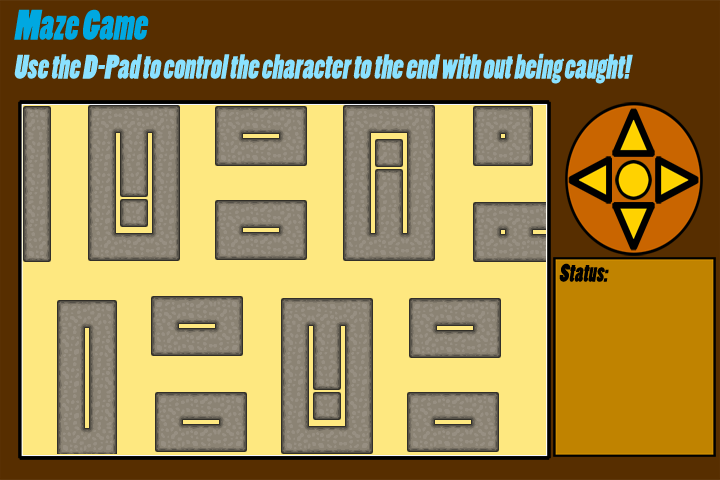
<style>
.page{position:relative;width:720px;height:480px;background:#fee880}
.page>*{position:absolute;margin:0}
.t1{font:40px "PoplarStd";color:#00a8e1;font-style:italic;scale:0.9 1}
.t2{font:32px "PoplarStd";color:#8ae1ff;font-style:italic;scale:0.9 1}
.t3{font:24px "PoplarStd";color:#000000;font-style:italic;scale:0.9 1}
</style>
<div class="page">
<p class="t1" style="left:14px;top:9px;width:135px;height:31px">Maze Game</p>
<p class="t2" style="left:14px;top:53px;width:619px;height:31px">Use the D-Pad to control the character to the end with out being caught!</p>
<p class="t3" style="left:559px;top:263px;width:50px;height:19px">Status:</p>
</div>
